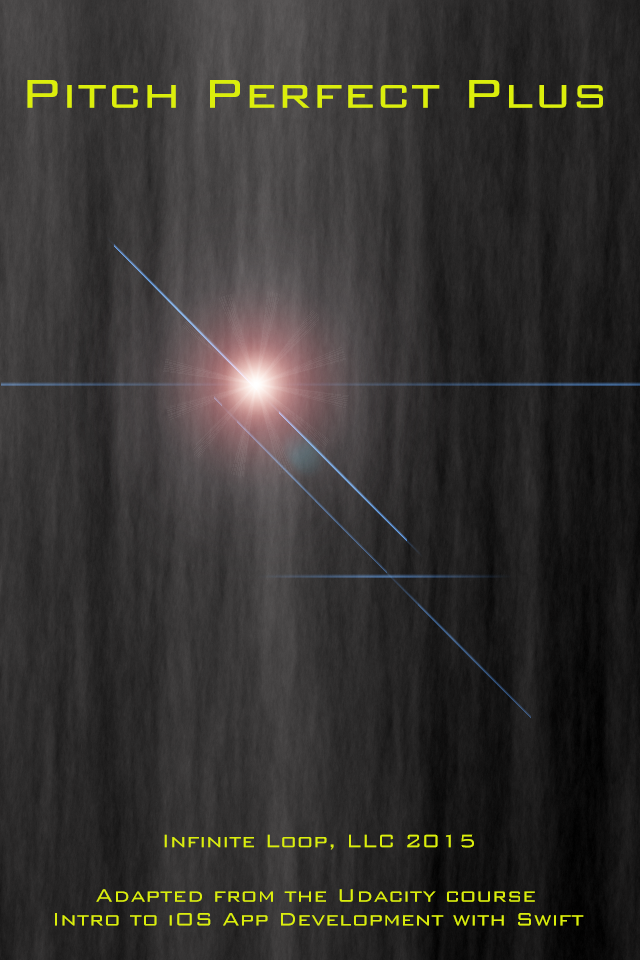
<style>
.page{position:relative;width:640px;height:960px}
.page>*{position:absolute;margin:0}
.t1{font:53.8px "BankGothic-Light";color:#dbee0b;scale:1.06 1}
.t2{font:24px "BankGothic-Light";color:#dbee0b}
</style>
<div class="page">
<p class="t1" style="left:27px;top:80px;width:576px;height:28px">Pitch Perfect Plus</p>
<p class="t2" style="left:164px;top:834px;width:310px;height:16px">Infinite Loop, LLC 2015</p>
<p class="t2" style="left:96px;top:889px;width:439px;height:13px">Adapted from the Udacity course</p>
<p class="t2" style="left:55px;top:913px;width:529px;height:13px">Intro to iOS App Development with Swift</p>
</div>
